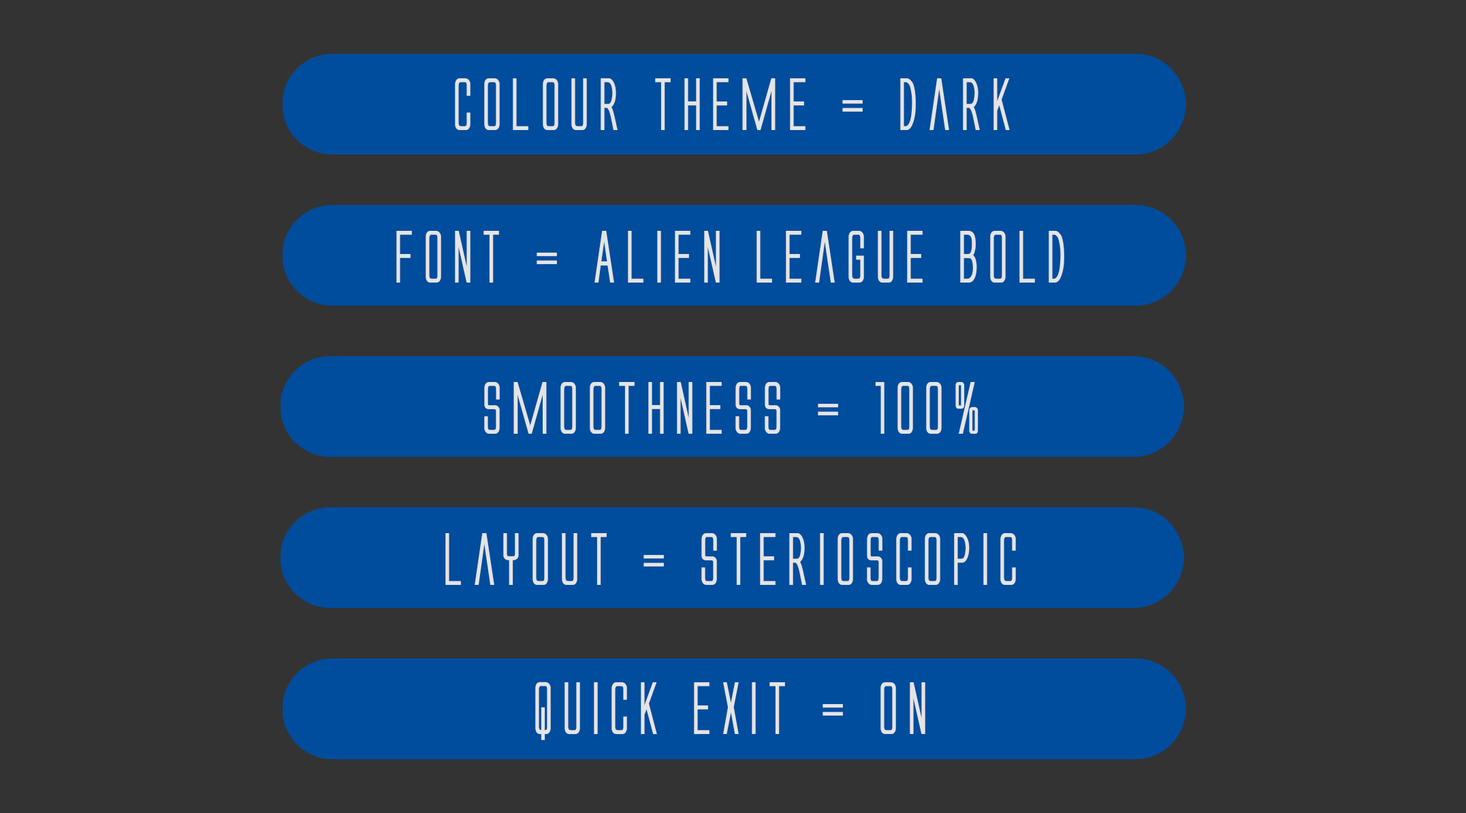
<style>
.page{position:relative;width:1466px;height:813px;background:#333333}
.page>*{position:absolute;margin:0}
.t1{font:68.7px "AlienLeagueBold";color:#e4e4e4}
</style>
<div class="page">
<p class="t1" style="left:455px;top:78px;width:555px;height:52px">Colour Theme = Dark</p>
<p class="t1" style="left:396px;top:231px;width:669px;height:52px">Font = Alien league bold</p>
<p class="t1" style="left:484px;top:382px;width:495px;height:52px">Smoothness = 100%</p>
<p class="t1" style="left:445px;top:533px;width:571px;height:52px">Layout = sterioscopic</p>
<p class="t1" style="left:535px;top:682px;width:391px;height:58px">Quick exit = on</p>
</div>
